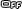
<style>
.page{position:relative;width:22px;height:9px;background:#ffffff}
.page>*{position:absolute;margin:0}
.t1{font:10px "ThundergodII";color:#ffffff}
</style>
<div class="page">
<p class="t1" style="left:1px;top:1px;width:20px;height:7px">Off</p>
</div>
